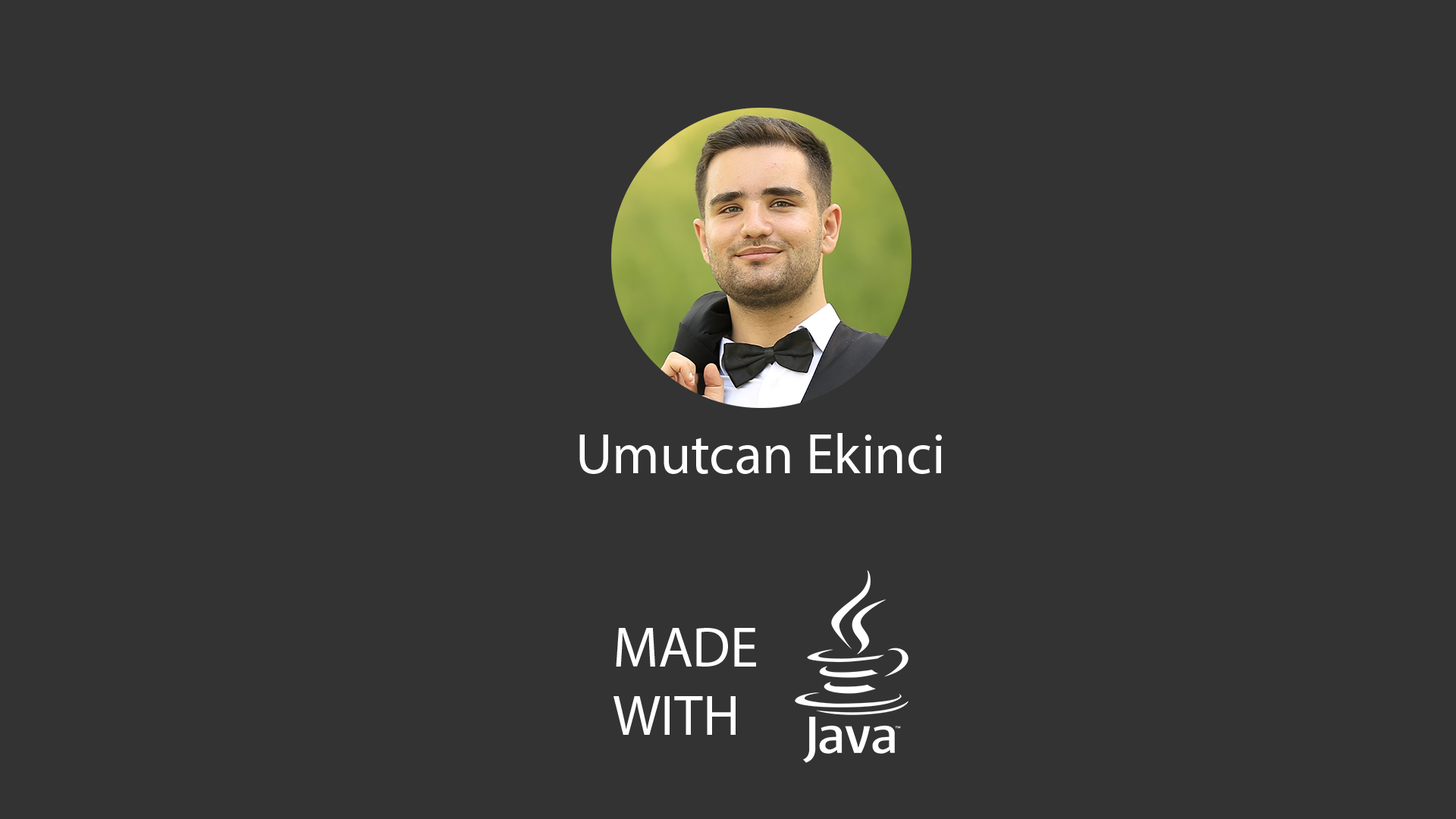
<style>
.page{position:relative;width:1456px;height:819px;background:#333333}
.page>*{position:absolute;margin:0}
.t1{font:56.9px "MyriadPro-Regular";color:#ffffff}
</style>
<div class="page">
<p class="t1" style="left:579px;top:433px;width:363px;height:41px">Umutcan Ekinci</p>
<p class="t1" style="left:613px;top:628px;width:143px;height:107px">MADE<br>WITH</p>
</div>
